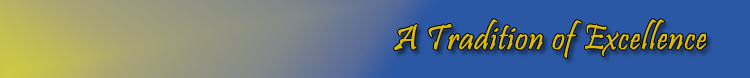
<style>
.page{position:relative;width:750px;height:78px}
.page>*{position:absolute;margin:0}
.t1{font:36px "Pristina-Regular";color:#dbbb07;font-weight:bold}
</style>
<div class="page">
<p class="t1" style="left:394px;top:19px;width:313px;height:39px">A Tradition of Excellence</p>
</div>
